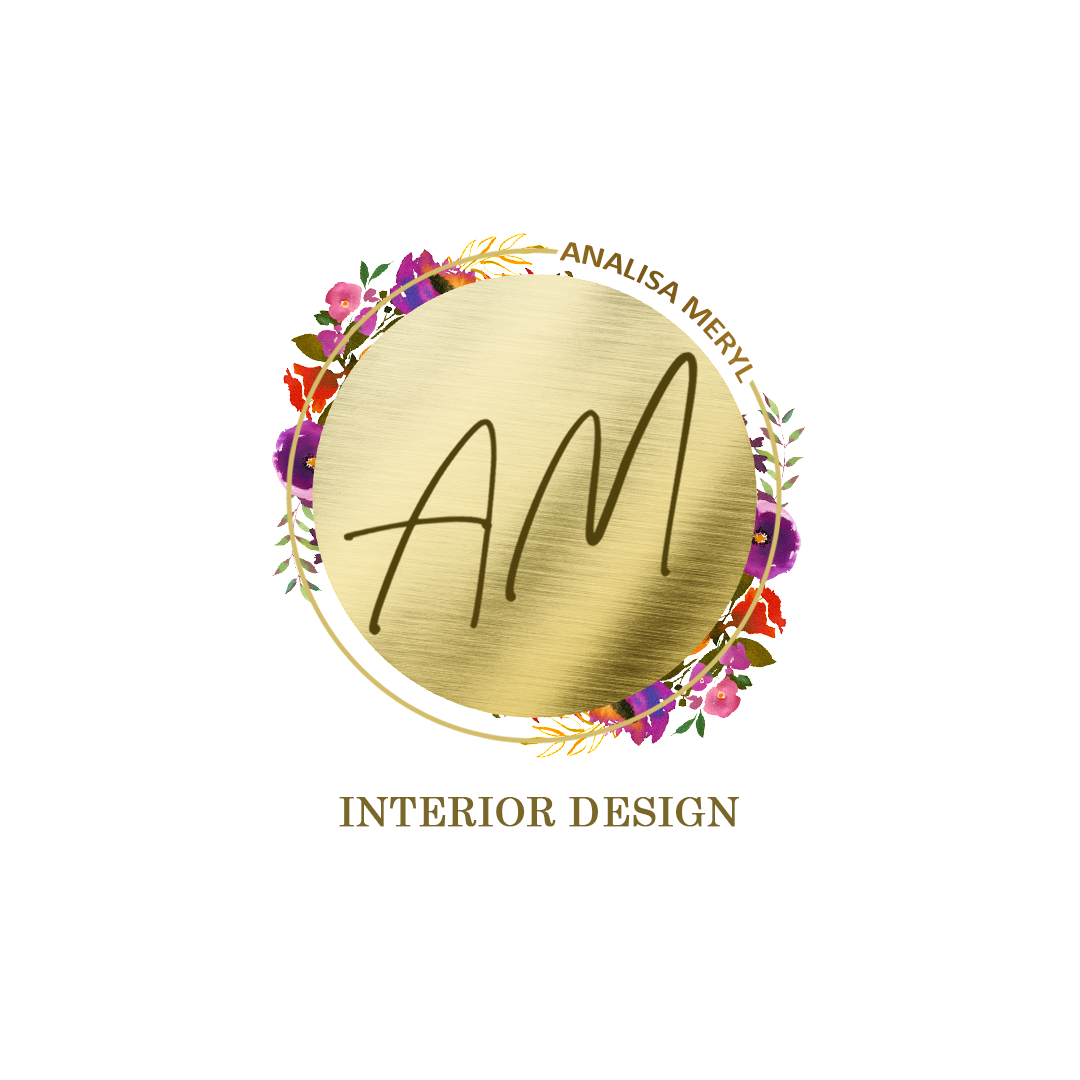
<style>
.page{position:relative;width:1080px;height:1080px;background:#ffffff}
.page>*{position:absolute;margin:0}
.t1{font:30.5px "Calibri-Bold";letter-spacing:0.015em;color:#8a641a;text-transform:uppercase}
.t2{font:406.8px "Wonderful-Melanesia-Signature";letter-spacing:-0.07em;color:#50410d;text-transform:uppercase}
.t3{font:40px "CenturySchoolbook";color:#7a6728;text-transform:uppercase;font-weight:bold}
</style>
<div class="page">
<p class="t1" style="left:559px;top:242px;width:194px;height:142px;rotate:34deg">ANALISA MERYL</p>
<p class="t2" style="left:342px;top:351px;width:357px;height:285px;rotate:-5deg">Am</p>
<p class="t3" style="left:339px;top:797px;width:400px;height:30px">interior Design</p>
</div>
